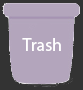
<style>
.page{position:relative;width:83px;height:90px;background:#b3a5bc}
.page>*{position:absolute;margin:0}
.t1{font:18px "MyriadPro-Regular";color:#ffffff}
</style>
<div class="page">
<p class="t1" style="left:22px;top:38px;width:39px;height:13px">Trash</p>
</div>
